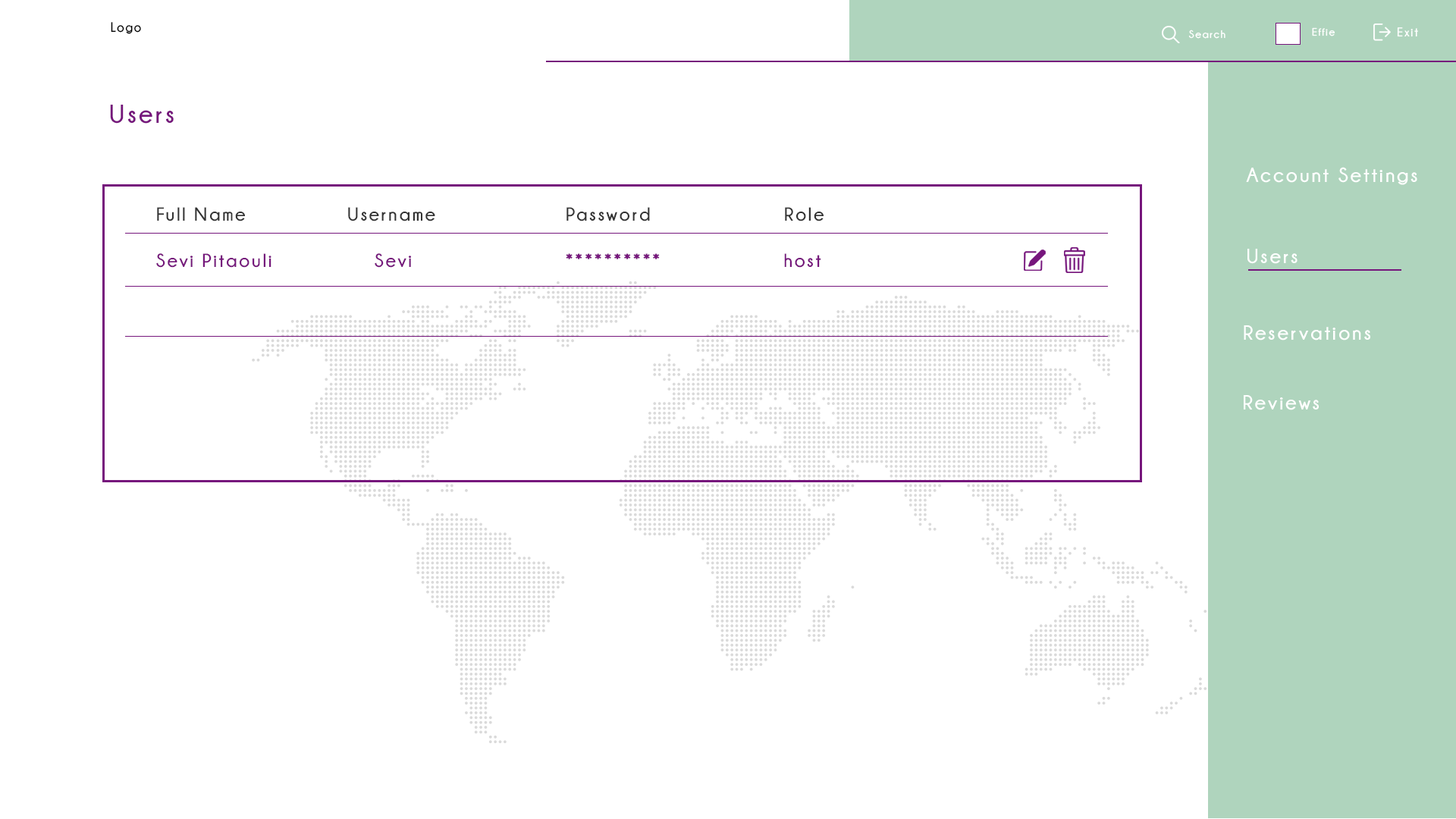
<style>
.page{position:relative;width:1456px;height:819px;background:#ffffff}
.page>*{position:absolute;margin:0}
.t1{font:13.6px "Champagne&Limousines-Bold";letter-spacing:0.1em;color:#000000;scale:0.94 1}
.t2{font:10.9px "Champagne&Limousines-Bold";letter-spacing:0.1em;color:#ffffff}
.t3{font:12.6px "Champagne&Limousines-Bold";letter-spacing:0.1em;color:#ffffff}
.t4{font:25.8px "Champagne&Limousines-Bold";letter-spacing:0.1em;color:#76167c}
.t5{font:20.5px "Champagne&Limousines-Bold";letter-spacing:0.1em;color:#ffffff}
.t6{font:19px "Champagne&Limousines-Bold";letter-spacing:0.1em;color:#333333}
.t7{font:19px "Champagne&Limousines-Bold";letter-spacing:0.1em;color:#76167c}
</style>
<div class="page">
<p class="t1" style="left:111px;top:22px;width:30px;height:12px">Logo</p>
<p class="t2" style="left:1188px;top:30px;width:37px;height:9px">Search</p>
<p class="t2" style="left:1312px;top:27px;width:23px;height:9px">Effie</p>
<p class="t3" style="left:1397px;top:27px;width:21px;height:10px">Exit</p>
<p class="t4" style="left:110px;top:105px;width:64px;height:19px">Users</p>
<p class="t5" style="left:1246px;top:167px;width:171px;height:18px">Account Settings</p>
<p class="t6" style="left:157px;top:207px;width:667px;height:14px">Full Name    Username     Password     Role</p>
<p class="t7" style="left:156px;top:253px;width:665px;height:15px">Sevi Pitaouli    Sevi      **********     host</p>
<p class="t5" style="left:1247px;top:249px;width:50px;height:15px">Users</p>
<p class="t5" style="left:1244px;top:325px;width:126px;height:15px">Reservations</p>
<p class="t5" style="left:1244px;top:395px;width:75px;height:15px">Reviews</p>
</div>
